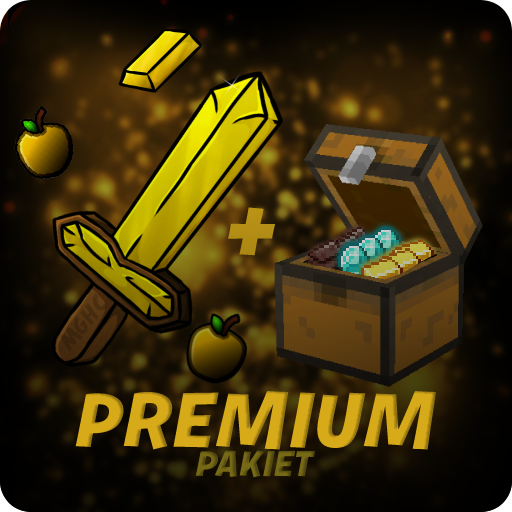
<style>
.page{position:relative;width:512px;height:512px}
.page>*{position:absolute;margin:0}
.t1{font:103px "BurbankSmall-BlackItalic";color:#b38d15}
.t2{font:77.8px "BurbankSmall-BlackItalic";color:#d7aa19}
.t3{font:36px "BurbankSmall-BlackItalic";color:#776a16}
</style>
<div class="page">
<p class="t1" style="left:228px;top:207px;width:48px;height:49px">+</p>
<p class="t2" style="left:75px;top:390px;width:362px;height:60px">PREMIUM</p>
<p class="t3" style="left:195px;top:450px;width:121px;height:28px">PAKIET</p>
</div>
